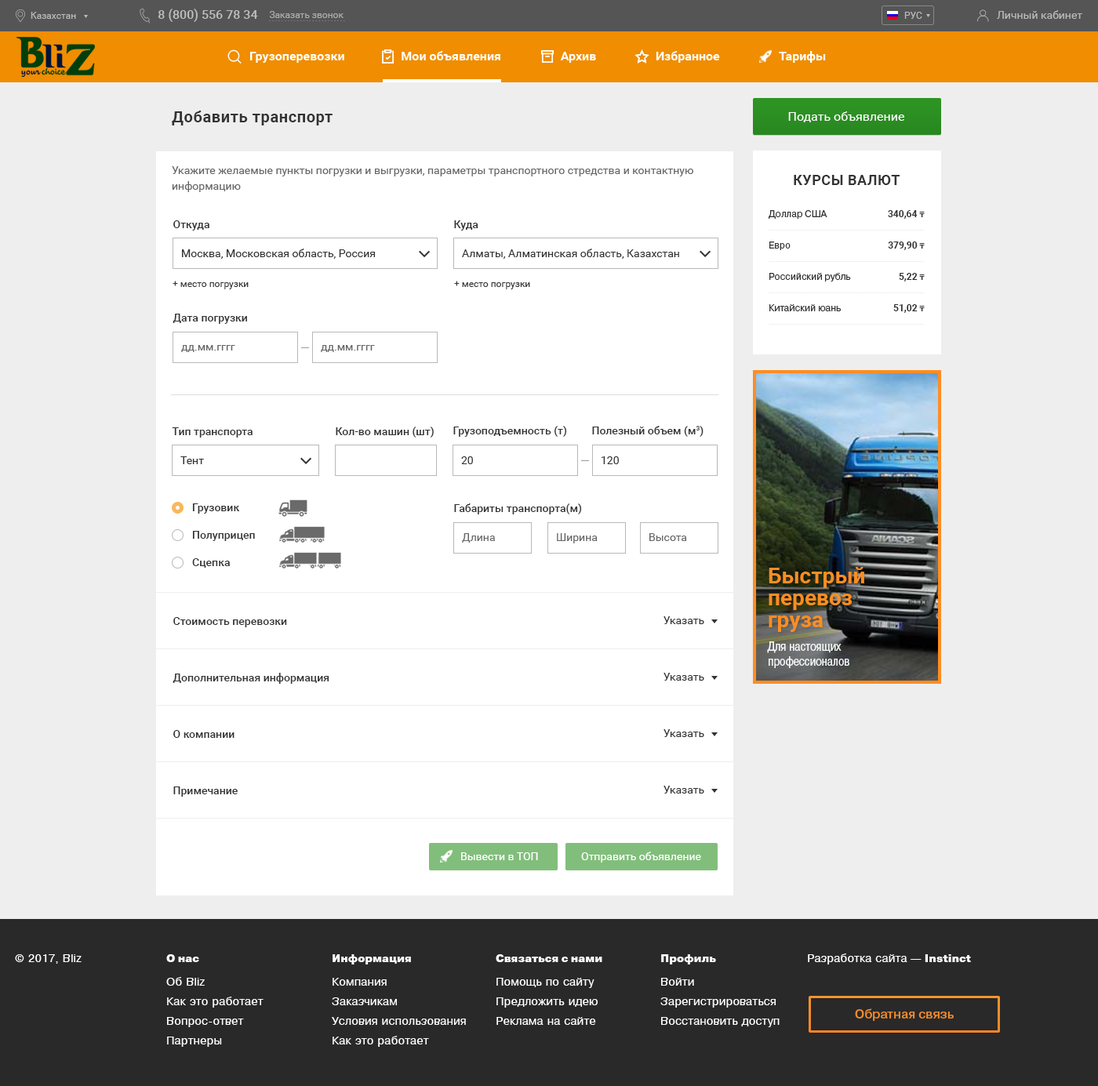
<style>
.page{position:relative;width:1098px;height:1086px;background:#ffffff}
.page>*{position:absolute;margin:0}
.t1{font:15.7px "Roboto-Bold";letter-spacing:0.03em;color:#333333}
.t2{font:12.5px "Roboto-Regular";color:#ffffff}
.t3{font:11px/15.7px "Roboto-Regular";color:#666666}
.t4{font:14.1px "Roboto-Bold";letter-spacing:0.03em;color:#333333;text-transform:uppercase}
.t5{font:11px "Roboto-Medium";color:#333333}
.t6{font:9.4px/31.4px "PragmaticaBook-Reg";color:#333333}
.t7{font:11px/31.4px "PragmaticaBlack";letter-spacing:0.03em;color:#333333;text-transform:uppercase}
.t8{font:9.4px/31.4px "Roboto-Bold";color:#303030}
.t9{font:7.8px/31.4px "TimesNewRomanPS-BoldMT";color:#303030}
.t10{font:11px "Roboto-Regular";color:#333333}
.t11{font:9.4px "Roboto-Regular";color:#333333}
.t12{font:11px "Roboto-Regular";color:#666666}
.t13{font:11px "Roboto-Regular";color:#ffffff}
</style>
<div class="page">
<p class="t1" style="left:172px;top:111px;width:161px;height:14px">Добавить транспорт</p>
<p class="t2" style="left:788px;top:111px;width:116px;height:11px">Подать объявление</p>
<p class="t3" style="left:172px;top:166px;width:521px;height:26px">Укажите желаемые пункты погрузки и выгрузки, параметры транспортного стредства и контактную информацию</p>
<p class="t4" style="left:794px;top:175px;width:105px;height:10px">Курсы валют</p>
<p class="t5" style="left:173px;top:220px;width:36px;height:11px">Откуда</p>
<p class="t5" style="left:454px;top:220px;width:24px;height:11px">Куда</p>
<p class="t6" style="left:769px;top:210px;width:82px;height:101px;text-align:center"><span class="t7"><br></span>Доллар США<br>Евро<br>Российский рубль<br>Китайский юань</p>
<p class="t8" style="left:888px;top:210px;width:37px;height:103px;text-align:right">340,64 <span class="t9">₸<br></span>379,90 <span class="t9">₸<br></span>5,22 <span class="t9">₸<br></span>51,02 <span class="t9">₸</span></p>
<p class="t10" style="left:182px;top:249px;width:193px;height:10px">Москва, Московская область, Россия</p>
<p class="t10" style="left:462px;top:249px;width:217px;height:10px">Алматы, Алматинская область, Казахстан</p>
<p class="t11" style="left:173px;top:281px;width:76px;height:8px">+ место погрузки</p>
<p class="t11" style="left:454px;top:281px;width:76px;height:8px">+ место погрузки</p>
<p class="t5" style="left:173px;top:314px;width:74px;height:10px">Дата погрузки</p>
<p class="t12" style="left:181px;top:345px;width:54px;height:7px">дд.мм.гггг</p>
<p class="t12" style="left:321px;top:345px;width:54px;height:7px">дд.мм.гггг</p>
<p class="t5" style="left:453px;top:426px;width:114px;height:11px">Грузоподъемность (т)</p>
<p class="t5" style="left:592px;top:426px;width:111px;height:11px">Полезный объем (м3)</p>
<p class="t5" style="left:172px;top:427px;width:81px;height:11px">Тип транспорта</p>
<p class="t5" style="left:336px;top:427px;width:98px;height:11px">Кол-во машин (шт)</p>
<p class="t10" style="left:180px;top:456px;width:24px;height:8px">Тент</p>
<p class="t10" style="left:461px;top:456px;width:12px;height:8px">20</p>
<p class="t10" style="left:601px;top:456px;width:18px;height:8px">120</p>
<p class="t5" style="left:192px;top:503px;width:48px;height:11px">Грузовик</p>
<p class="t5" style="left:454px;top:503px;width:128px;height:11px">Габариты транспорта(м)</p>
<p class="t5" style="left:192px;top:531px;width:63px;height:10px">Полуприцеп</p>
<p class="t12" style="left:462px;top:533px;width:33px;height:10px">Длина</p>
<p class="t12" style="left:557px;top:533px;width:41px;height:10px">Ширина</p>
<p class="t12" style="left:649px;top:533px;width:38px;height:8px">Высота</p>
<p class="t5" style="left:192px;top:558px;width:38px;height:10px">Сцепка</p>
<p class="t5" style="left:173px;top:617px;width:114px;height:10px">Стоимость перевозки</p>
<p class="t10" style="left:663px;top:616px;width:41px;height:8px">Указать</p>
<p class="t5" style="left:173px;top:673px;width:156px;height:11px">Дополнительная информация</p>
<p class="t10" style="left:663px;top:673px;width:41px;height:8px">Указать</p>
<p class="t5" style="left:173px;top:730px;width:61px;height:8px">О компании</p>
<p class="t10" style="left:663px;top:729px;width:41px;height:8px">Указать</p>
<p class="t10" style="left:663px;top:786px;width:41px;height:8px">Указать</p>
<p class="t5" style="left:173px;top:787px;width:65px;height:10px">Примечание</p>
<p class="t13" style="left:461px;top:852px;width:77px;height:8px">Вывести в ТОП</p>
<p class="t13" style="left:581px;top:852px;width:120px;height:11px">Отправить объявление</p>
</div>
